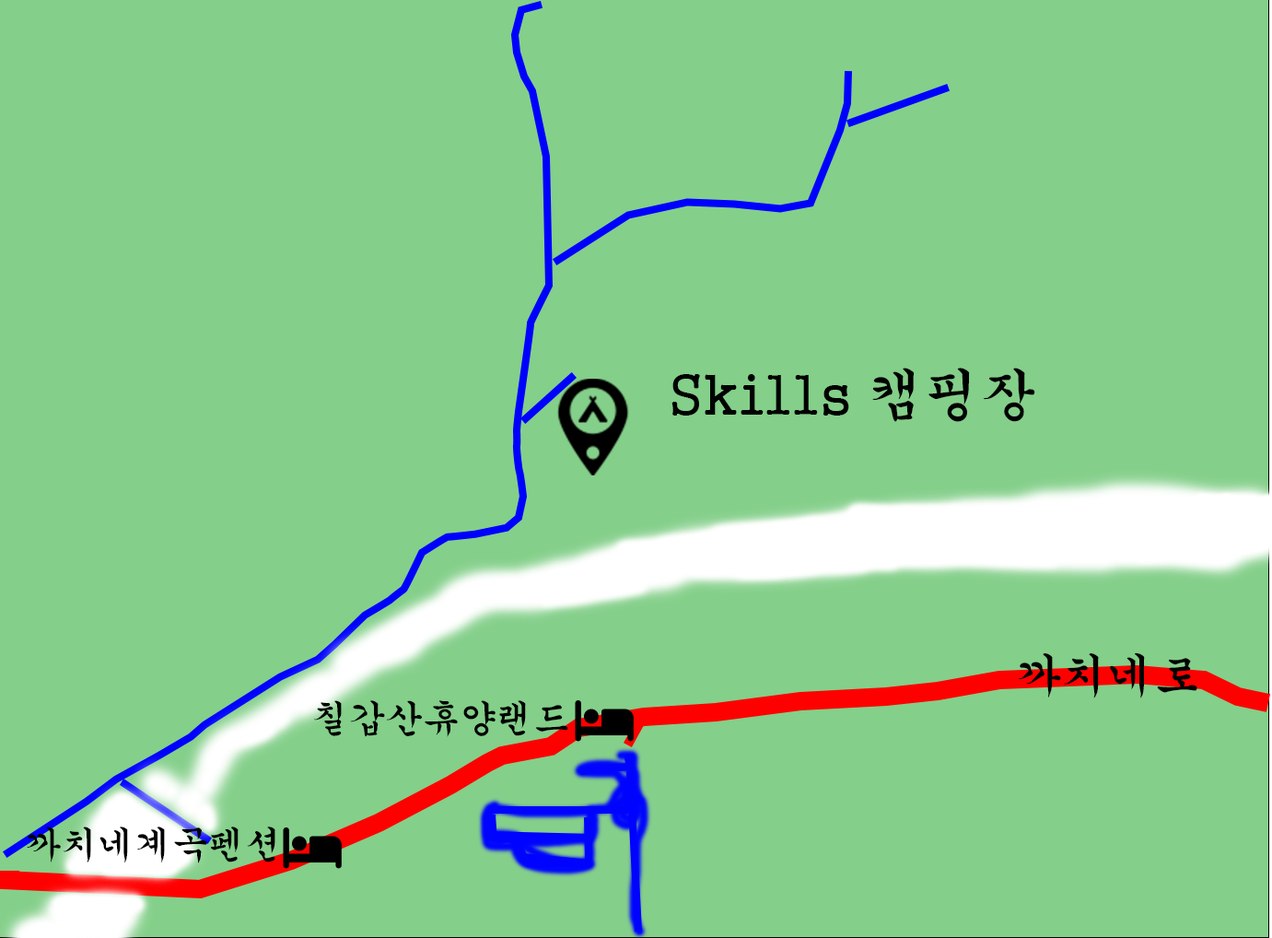
<style>
.page{position:relative;width:1272px;height:938px;background:#84cf8a}
.page>*{position:absolute;margin:0}
.t1{font:55.3px "Gungsuh";color:#000000}
.t2{font:46px "Gungsuh";color:#000000}
.t3{font:36.8px "Gungsuh";color:#000000}
</style>
<div class="page">
<p class="t1" style="left:671px;top:367px;width:364px;height:55px">Skills 캠핑장</p>
<p class="t2" style="left:1019px;top:652px;width:178px;height:46px">까치네로</p>
<p class="t3" style="left:314px;top:700px;width:254px;height:37px">칠갑산휴양랜드</p>
<p class="t3" style="left:27px;top:826px;width:248px;height:37px">까치네계곡펜션</p>
</div>
